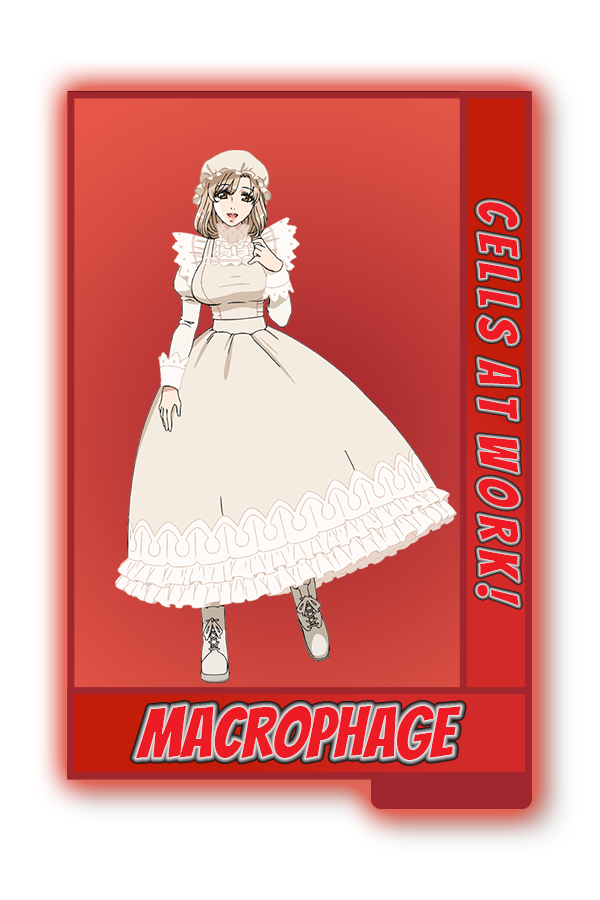
<style>
.page{position:relative;width:600px;height:900px;background:#ffffff}
.page>*{position:absolute;margin:0}
.t1{font:54px "Bangers-Regular";color:#ed1c24}
.t2{font:70px "Bangers-Regular";color:#ed1c24}
</style>
<div class="page">
<p class="t1" style="left:477px;top:202px;width:42px;height:404px;rotate:90deg">C e l l S  A t  W o r k !</p>
<p class="t2" style="left:135px;top:706px;width:326px;height:54px">Macrophage</p>
</div>
